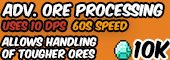
<style>
.page{position:relative;width:170px;height:60px}
.page>*{position:absolute;margin:0}
.t1{font:14px "KomikaAxis";color:#ffffff}
.t2{font:10px "KomikaAxis";color:#c0392b}
.t3{font:10px "KomikaAxis";color:#f39c12}
.t4{font:10px "KomikaAxis";color:#ffffff}
.t5{font:20.1px "KomikaAxis";color:#000000}
</style>
<div class="page">
<p class="t1" style="left:2px;top:3px;width:161px;height:14px">adv. ore processing</p>
<p class="t2" style="left:2px;top:21px;width:126px;height:10px">uses 10 dps  <span class="t3">60s speed</span></p>
<p class="t4" style="left:1px;top:37px;width:96px;height:22px">allows handling<br>of tougher ores</p>
<p class="t5" style="left:134px;top:40px;width:36px;height:19px">10k</p>
</div>
